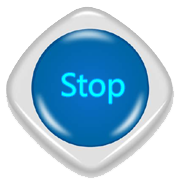
<style>
.page{position:relative;width:180px;height:184px;background:#ffffff}
.page>*{position:absolute;margin:0}
.t1{font:30px "MicrosoftYaHei";color:#00ffff}
</style>
<div class="page">
<p class="t1" style="left:62px;top:73px;width:63px;height:31px">Stop</p>
</div>
